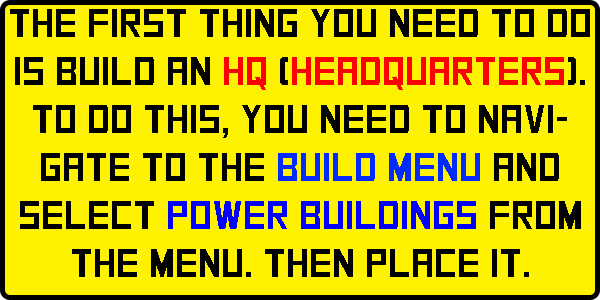
<style>
.page{position:relative;width:600px;height:300px;background:#fff200}
.page>*{position:absolute;margin:0}
.t1{font:40px "SquareFont";color:#000000}
.t2{font:40px "SquareFont";color:#ff0000}
.t3{font:40px "SquareFont";color:#002aff}
.t4{font:40px "SquareFont";color:#0000ff}
</style>
<div class="page">
<p class="t1" style="left:10px;top:9px;width:580px;height:268px;text-align:center">The first thing you need to do is build an <span class="t2">hq</span> (<span class="t2">Headquarters</span>). To do this, you need to navigate to the <span class="t3">build menu</span> and select <span class="t4">power buildings</span> from the menu. Then place it.</p>
</div>
